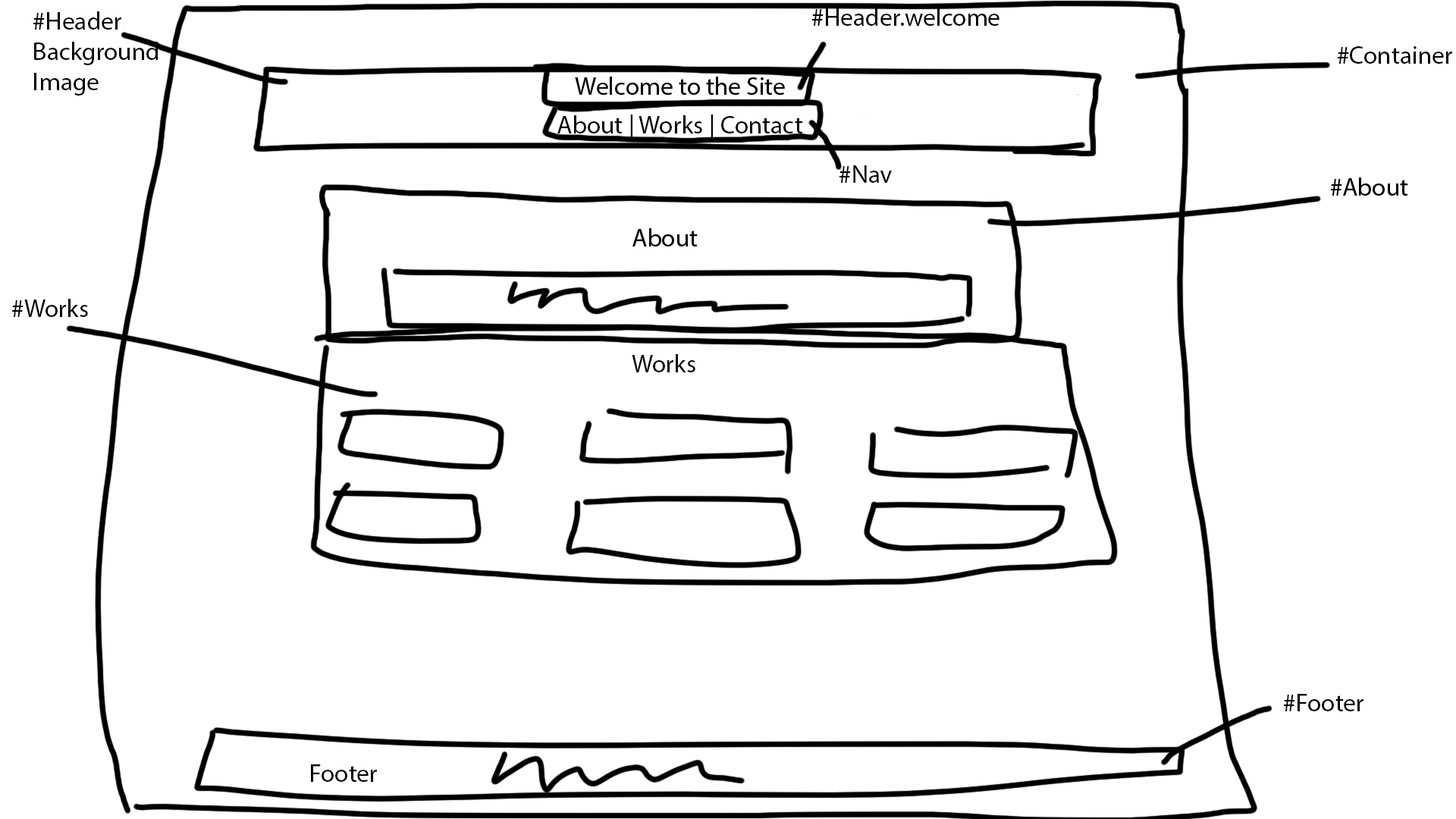
<style>
.page{position:relative;width:1456px;height:819px;background:#ffffff}
.page>*{position:absolute;margin:0}
.t1{font:25.3px "MyriadPro-Regular";color:#000000}
</style>
<div class="page">
<p class="t1" style="left:33px;top:11px;width:125px;height:85px">#Header<br>Background <br>Image</p>
<p class="t1" style="left:812px;top:8px;width:187px;height:18px">#Header.welcome</p>
<p class="t1" style="left:1338px;top:46px;width:114px;height:18px">#Container</p>
<p class="t1" style="left:557px;top:115px;width:246px;height:25px">About | Works | Contact</p>
<p class="t1" style="left:839px;top:165px;width:53px;height:18px">#Nav</p>
<p class="t1" style="left:12px;top:299px;width:76px;height:18px">#Works</p>
<p class="t1" style="left:632px;top:354px;width:63px;height:18px">Works</p>
<p class="t1" style="left:1284px;top:694px;width:79px;height:17px">#Footer</p>
<p class="t1" style="left:311px;top:764px;width:66px;height:18px">Footer</p>
</div>
